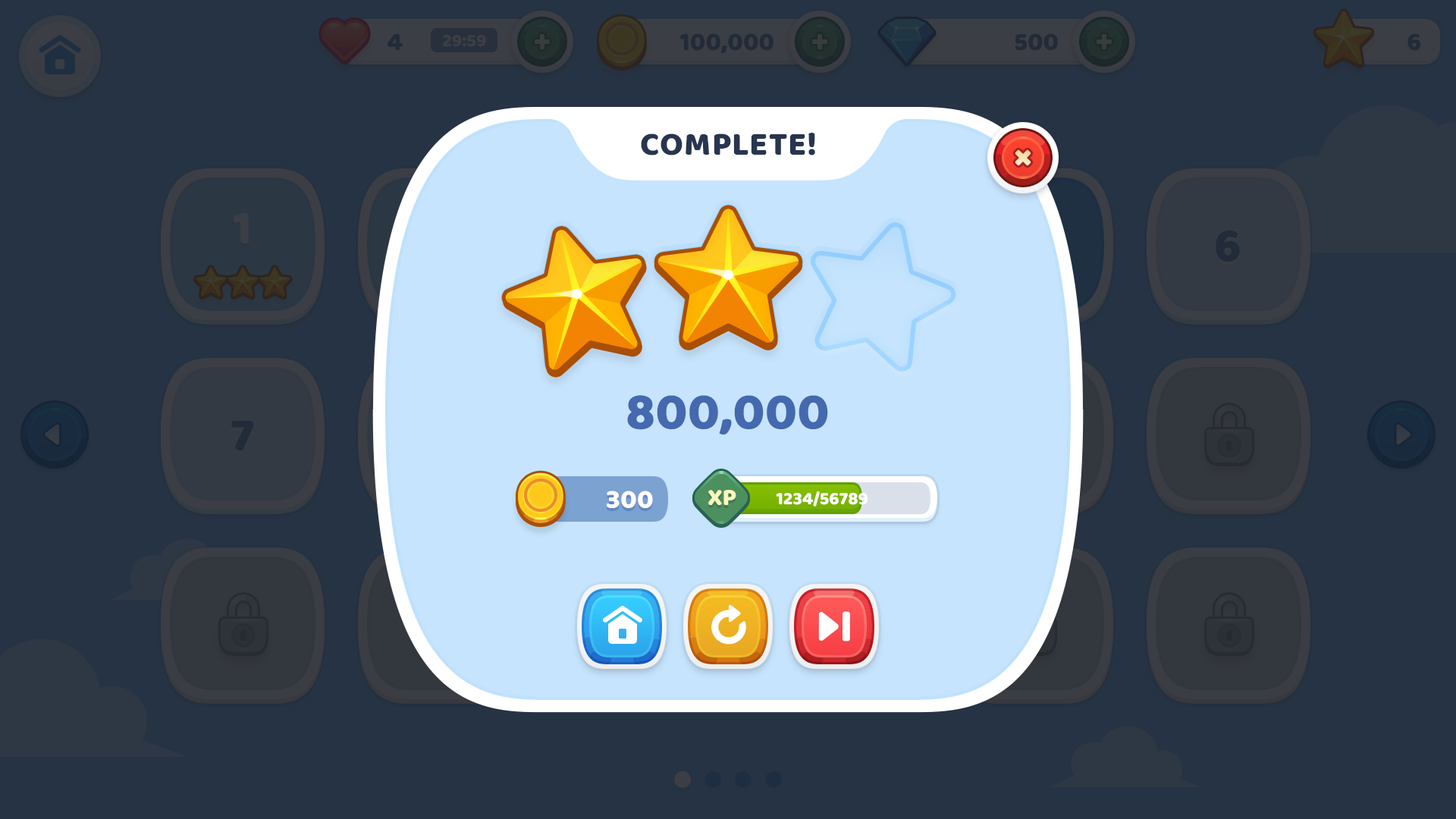
<style>
.page{position:relative;width:1456px;height:819px;background:#263344}
.page>*{position:absolute;margin:0}
.t1{font:33.4px "BalooBhaijaan-Regular";color:#273550;text-transform:uppercase}
.t2{font:53.1px "BalooBhaijaan-Regular";color:#4469af;text-transform:uppercase}
.t3{font:27.3px "BalooBhaijaan-Regular";color:#ffffff;text-transform:uppercase}
.t4{font:24.3px "BalooBhaijaan-Regular";color:#fff7bc;text-transform:uppercase}
.t5{font:18.2px "BalooBhaijaan-Regular";color:#ffffff;text-transform:uppercase}
</style>
<div class="page">
<p class="t1" style="left:641px;top:133px;width:174px;height:22px">complete!</p>
<p class="t2" style="left:627px;top:395px;width:201px;height:40px">800,000</p>
<p class="t3" style="left:606px;top:491px;width:47px;height:17px">300</p>
<p class="t4" style="left:708px;top:490px;width:28px;height:15px">xp</p>
<p class="t5" style="left:776px;top:491px;width:92px;height:16px">1234/56789</p>
</div>
